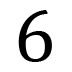
<style>
.page{position:relative;width:72px;height:72px;background:#ffffff}
.page>*{position:absolute;margin:0}
.t1{font:75px "CambriaMath";color:#000000}
</style>
<div class="page">
<p class="t1" style="left:18px;top:10px;width:34px;height:52px">6</p>
</div>
